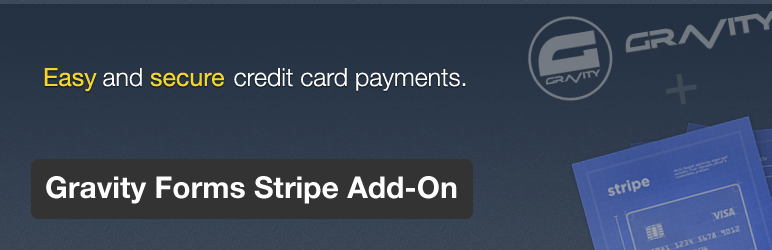
<style>
.page{position:relative;width:772px;height:250px}
.page>*{position:absolute;margin:0}
.t1{font:25px "HelveticaNeue";color:#f3d62c}
.t2{font:25px "HelveticaNeue-Light";color:#ffffff}
.t3{font:60px "Helvetica";color:#515b63}
.t4{font:30px "HelveticaNeue-Bold";color:#fffefe}
</style>
<div class="page">
<p class="t1" style="left:44px;top:68px;width:53px;height:24px">Easy</p>
<p class="t2" style="left:103px;top:68px;width:363px;height:23px">and             credit card payments.</p>
<p class="t1" style="left:150px;top:72px;width:74px;height:15px">secure</p>
<p class="t3" style="left:666px;top:73px;width:31px;height:32px;rotate:-9deg">+</p>
<p class="t4" style="left:46px;top:176px;width:411px;height:28px">Gravity Forms Stripe Add-On</p>
</div>
